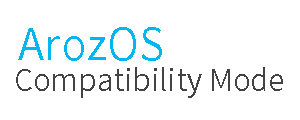
<style>
.page{position:relative;width:300px;height:120px;background:#ffffff}
.page>*{position:absolute;margin:0}
.t1{font:43.2px "NotoSansCJKhk-DemiLight";color:#00b7ee}
.t2{font:30px "NotoSansCJKhk-DemiLight";color:#434343}
</style>
<div class="page">
<p class="t1" style="left:18px;top:27px;width:144px;height:34px">ArozOS</p>
<p class="t2" style="left:16px;top:67px;width:267px;height:31px">Compatibility Mode</p>
</div>
